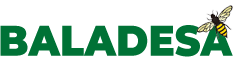
<style>
.page{position:relative;width:238px;height:57px;background:#ffffff}
.page>*{position:absolute;margin:0}
.t1{font:42.9px "Montserrat-Black";color:#007236;scale:0.91 1}
</style>
<div class="page">
<p class="t1" style="left:0px;top:25px;width:233px;height:32px">BALADESA</p>
</div>
